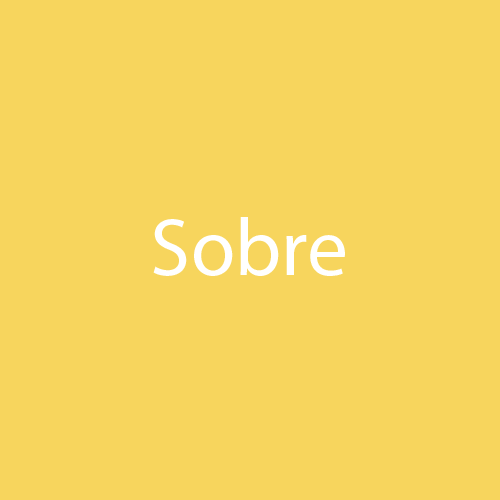
<style>
.page{position:relative;width:500px;height:500px;background:#f7d55d}
.page>*{position:absolute;margin:0}
.t1{font:81.3px "MyriadPro-Regular";color:#ffffff}
</style>
<div class="page">
<p class="t1" style="left:153px;top:217px;width:192px;height:59px">Sobre</p>
</div>
